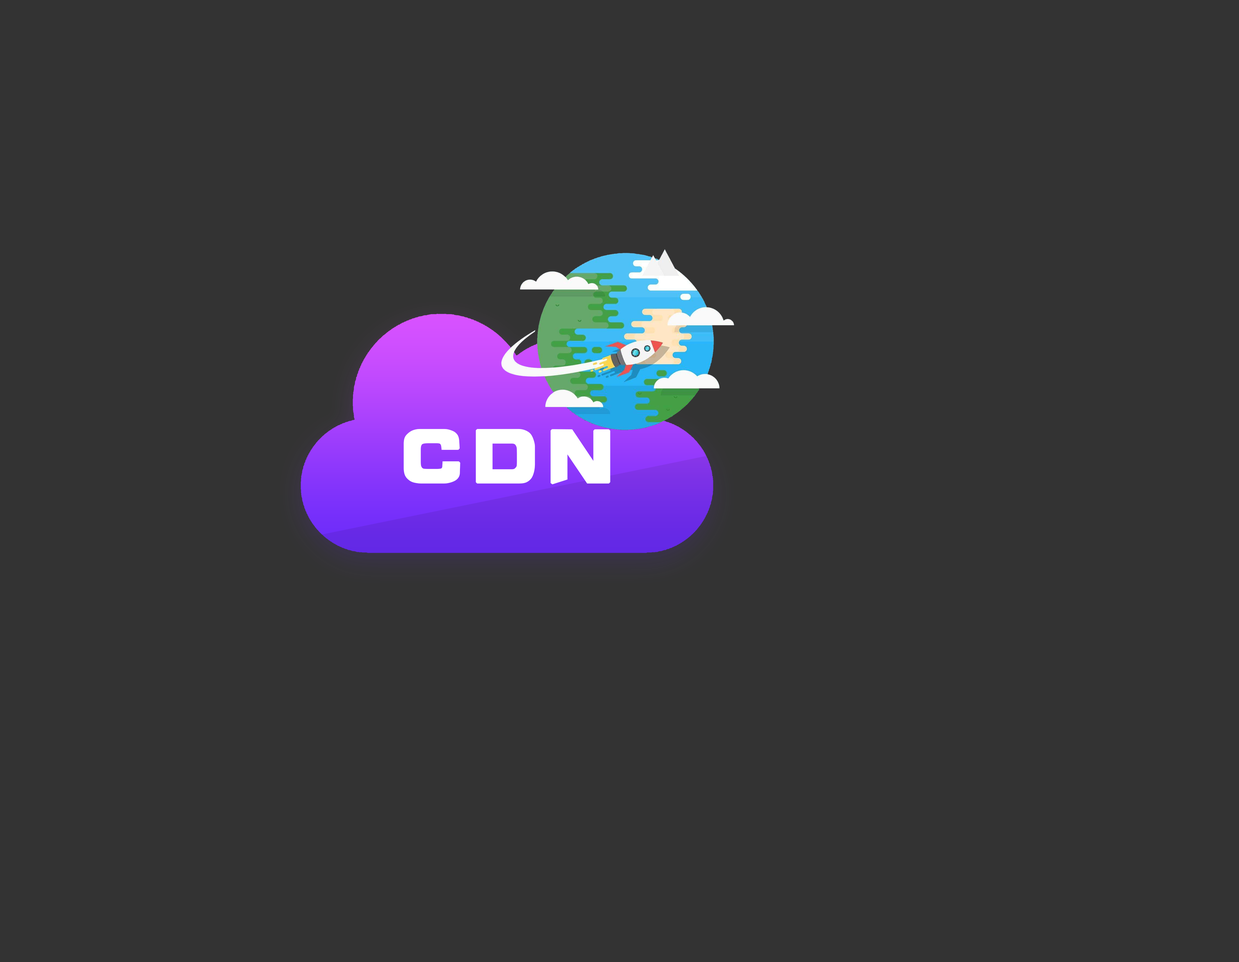
<style>
.page{position:relative;width:1239px;height:962px;background:#333333}
.page>*{position:absolute;margin:0}
.t1{font:76.7px "JLinXin";letter-spacing:0.1em;color:#ffffff;font-weight:bold}
</style>
<div class="page">
<p class="t1" style="left:404px;top:429px;width:207px;height:56px">CDN</p>
</div>
